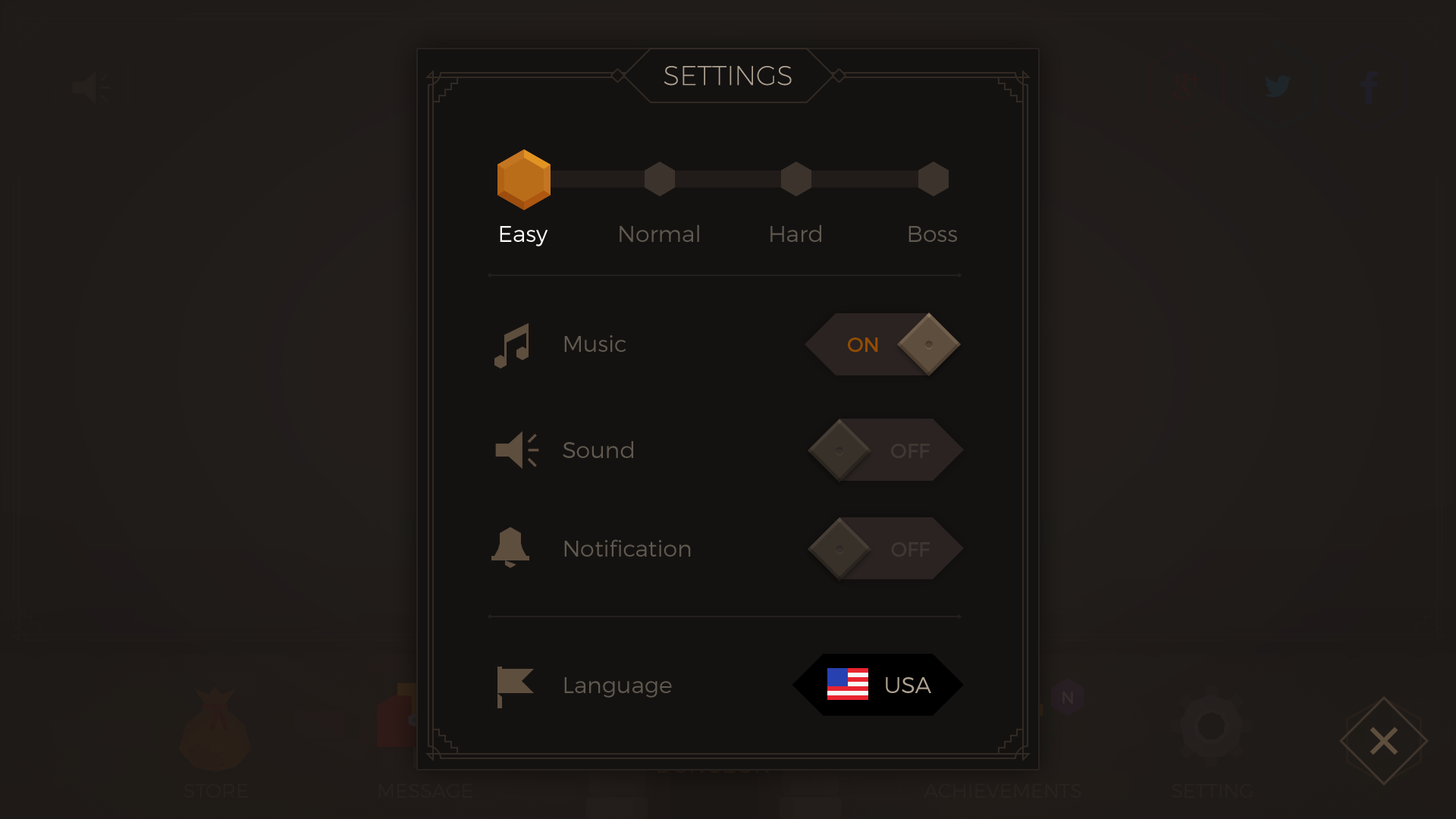
<style>
.page{position:relative;width:1456px;height:819px;background:#141211}
.page>*{position:absolute;margin:0}
.t1{font:27.2px "Montserrat-UltraLight";color:#aea190;text-transform:uppercase}
.t2{font:22.7px "Montserrat-Light";color:#ffffff}
.t3{font:22.7px "Montserrat-Light";color:#60594f}
.t4{font:20.5px "Montserrat-Regular";color:#934c00}
.t5{font:20.6px "Montserrat-Regular";color:#3e3732}
.t6{font:20.5px "Montserrat-Regular";color:#3e3732}
.t7{font:22.7px "Montserrat-Light";color:#aea190}
</style>
<div class="page">
<p class="t1" style="left:664px;top:66px;width:128px;height:20px">Settings</p>
<p class="t2" style="left:500px;top:226px;width:48px;height:20px">Easy</p>
<p class="t3" style="left:620px;top:224px;width:79px;height:18px">Normal</p>
<p class="t3" style="left:770px;top:224px;width:51px;height:18px">Hard</p>
<p class="t3" style="left:908px;top:226px;width:49px;height:16px">Boss</p>
<p class="t3" style="left:564px;top:335px;width:62px;height:17px">Music</p>
<p class="t4" style="left:848px;top:337px;width:30px;height:16px">ON</p>
<p class="t3" style="left:563px;top:441px;width:70px;height:17px">Sound</p>
<p class="t5" style="left:891px;top:444px;width:39px;height:15px">OFF</p>
<p class="t3" style="left:564px;top:539px;width:127px;height:18px">Notification</p>
<p class="t6" style="left:891px;top:542px;width:39px;height:15px">OFF</p>
<p class="t3" style="left:564px;top:677px;width:108px;height:21px">Language</p>
<p class="t7" style="left:886px;top:677px;width:45px;height:16px">USA</p>
</div>
